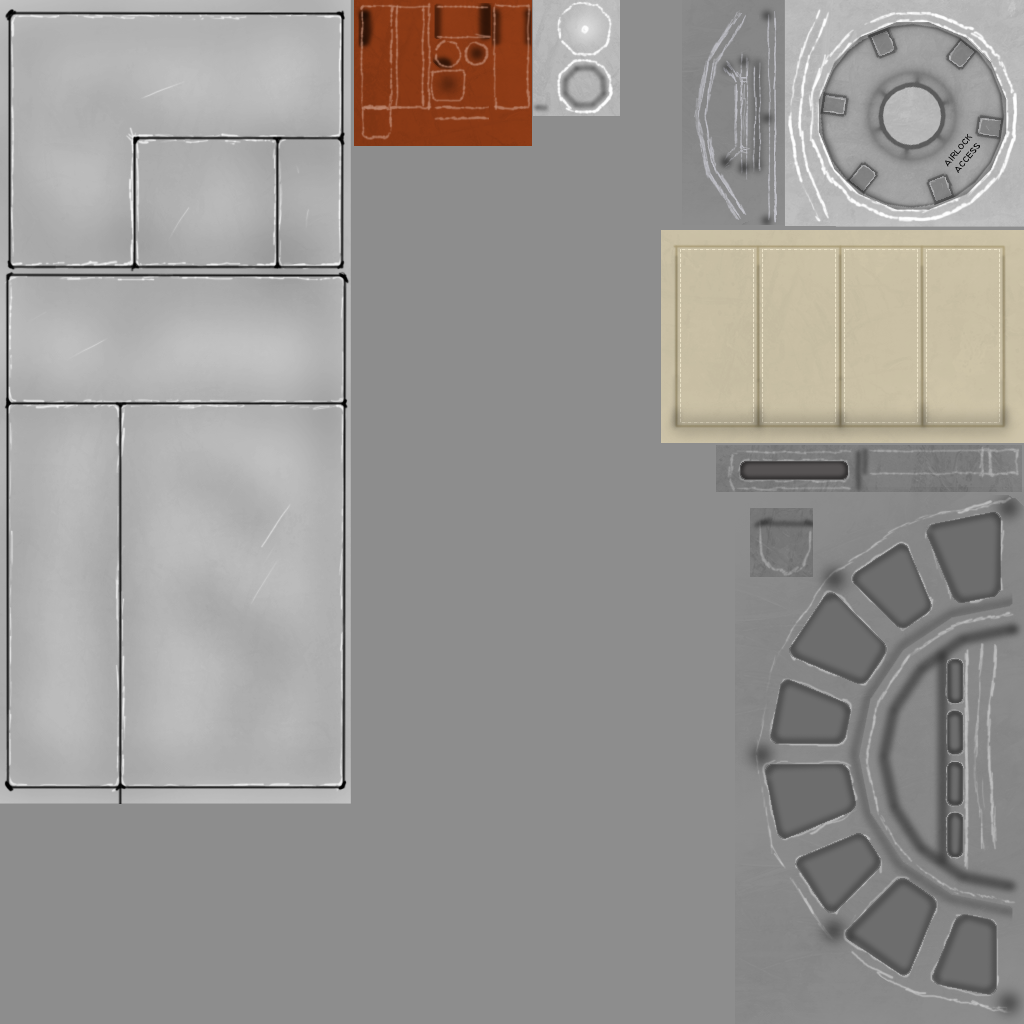
<style>
.page{position:relative;width:1024px;height:1024px;background:#8d8d8d}
.page>*{position:absolute;margin:0}
.t1{font:10px "TechnicLite";color:#000000;scale:1.2 1}
</style>
<div class="page">
<p class="t1" style="left:945px;top:134px;width:35px;height:39px;text-align:center;rotate:-50deg">airlock<br>access</p>
</div>
